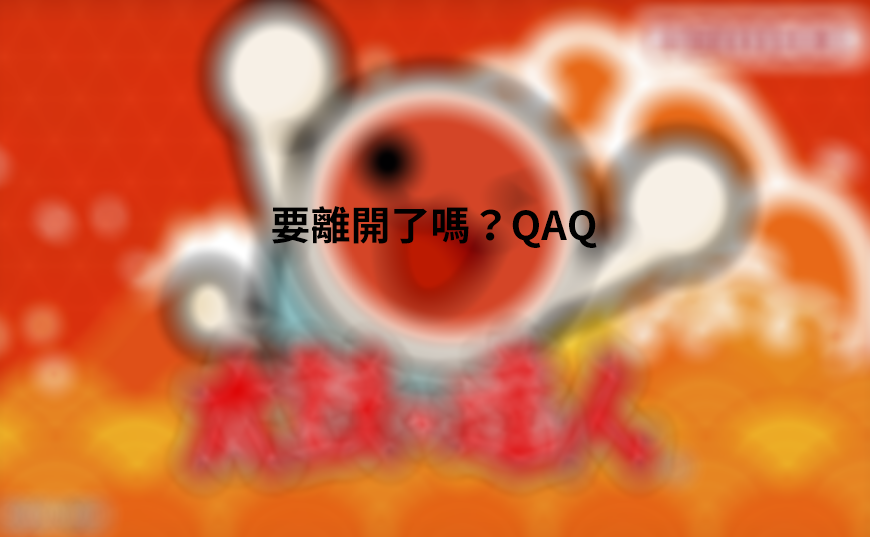
<style>
.page{position:relative;width:870px;height:537px}
.page>*{position:absolute;margin:0}
.t1{font:40px "NotoSansHant-Bold";color:#000000}
</style>
<div class="page">
<p class="t1" style="left:272px;top:206px;width:325px;height:42px">要離開了嗎？QAQ</p>
</div>
